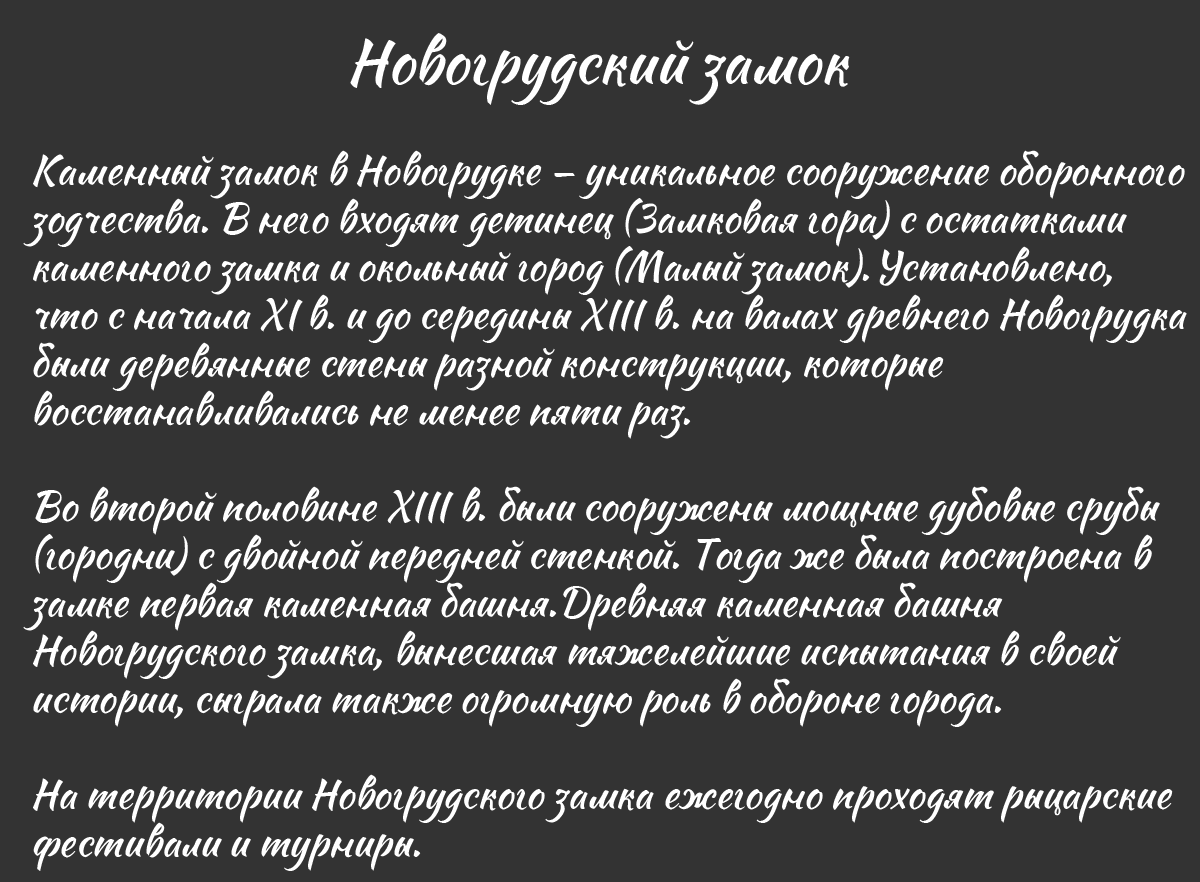
<style>
.page{position:relative;width:1200px;height:882px;background:#333333}
.page>*{position:absolute;margin:0}
.t1{font:60px "Sweet-Mavka-Script";color:#ffffff}
.t2{font:40px "Sweet-Mavka-Script";color:#ffffff}
</style>
<div class="page">
<p class="t1" style="left:350px;top:33px;width:500px;height:72px">Новогрудский замок</p>
<p class="t2" style="left:23px;top:150px;width:1164px;height:721px">Каменный замок в Новогрудке — уникальное сооружение оборонного <br>зодчества. В него входят детинец (Замковая гора) с остатками <br>каменного замка и окольный город (Малый замок). Установлено, <br>что с начала XI в. и до середины XIII в. на валах древнего Новогрудка <br>были деревянные стены разной конструкции, которые <br>восстанавливались не менее пяти раз.<br><br>Во второй половине XIII в. были сооружены мощные дубовые срубы <br>(городни) с двойной передней стенкой. Тогда же была построена в <br>замке первая каменная башня.Древняя каменная башня <br>Новогрудского замка, вынесшая тяжелейшие испытания в своей <br>истории, сыграла также огромную роль в обороне города.<br><br>На территории Новогрудского замка ежегодно проходят рыцарские <br>фестивали и турниры.</p>
</div>
